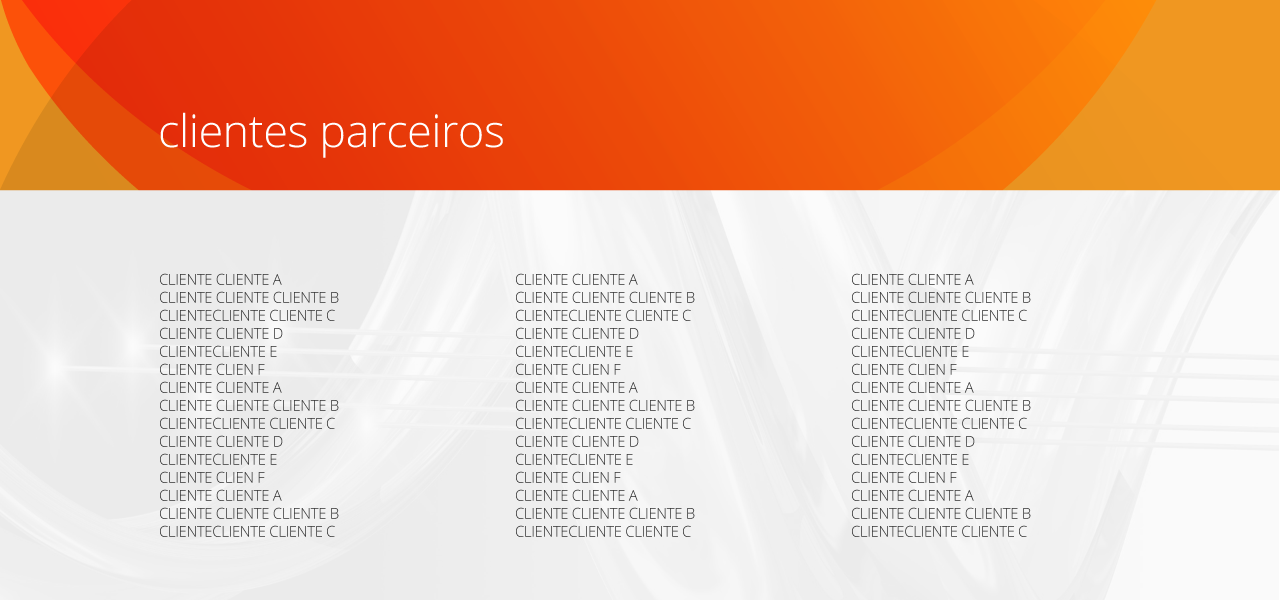
<style>
.page{position:relative;width:1280px;height:600px}
.page>*{position:absolute;margin:0}
.t1{font:45px "OpenSans-Light";letter-spacing:-0.01em;color:#ffffff}
.t2{font:15px "OpenSans-Light";letter-spacing:-0.025em;color:#333333}
</style>
<div class="page">
<p class="t1" style="left:160px;top:112px;width:343px;height:46px">clientes parceiros</p>
<p class="t2" style="left:160px;top:273px;width:179px;height:264px">CLIENTE CLIENTE A<br>CLIENTE CLIENTE CLIENTE B<br>CLIENTECLIENTE CLIENTE C<br>CLIENTE CLIENTE D <br>CLIENTECLIENTE E<br>CLIENTE CLIEN F<br>CLIENTE CLIENTE A<br>CLIENTE CLIENTE CLIENTE B<br>CLIENTECLIENTE CLIENTE C<br>CLIENTE CLIENTE D <br>CLIENTECLIENTE E<br>CLIENTE CLIEN F<br>CLIENTE CLIENTE A<br>CLIENTE CLIENTE CLIENTE B<br>CLIENTECLIENTE CLIENTE C</p>
<p class="t2" style="left:516px;top:273px;width:179px;height:264px">CLIENTE CLIENTE A<br>CLIENTE CLIENTE CLIENTE B<br>CLIENTECLIENTE CLIENTE C<br>CLIENTE CLIENTE D <br>CLIENTECLIENTE E<br>CLIENTE CLIEN F<br>CLIENTE CLIENTE A<br>CLIENTE CLIENTE CLIENTE B<br>CLIENTECLIENTE CLIENTE C<br>CLIENTE CLIENTE D <br>CLIENTECLIENTE E<br>CLIENTE CLIEN F<br>CLIENTE CLIENTE A<br>CLIENTE CLIENTE CLIENTE B<br>CLIENTECLIENTE CLIENTE C</p>
<p class="t2" style="left:852px;top:273px;width:179px;height:264px">CLIENTE CLIENTE A<br>CLIENTE CLIENTE CLIENTE B<br>CLIENTECLIENTE CLIENTE C<br>CLIENTE CLIENTE D <br>CLIENTECLIENTE E<br>CLIENTE CLIEN F<br>CLIENTE CLIENTE A<br>CLIENTE CLIENTE CLIENTE B<br>CLIENTECLIENTE CLIENTE C<br>CLIENTE CLIENTE D <br>CLIENTECLIENTE E<br>CLIENTE CLIEN F<br>CLIENTE CLIENTE A<br>CLIENTE CLIENTE CLIENTE B<br>CLIENTECLIENTE CLIENTE C</p>
</div>
